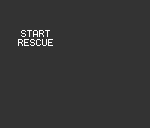
<style>
.page{position:relative;width:150px;height:128px;background:#333333}
.page>*{position:absolute;margin:0}
.t1{font:8px "Terminal";color:#ffffff}
</style>
<div class="page">
<p class="t1" style="left:18px;top:30px;width:35px;height:16px;text-align:center">START<br>RESCUE</p>
</div>
